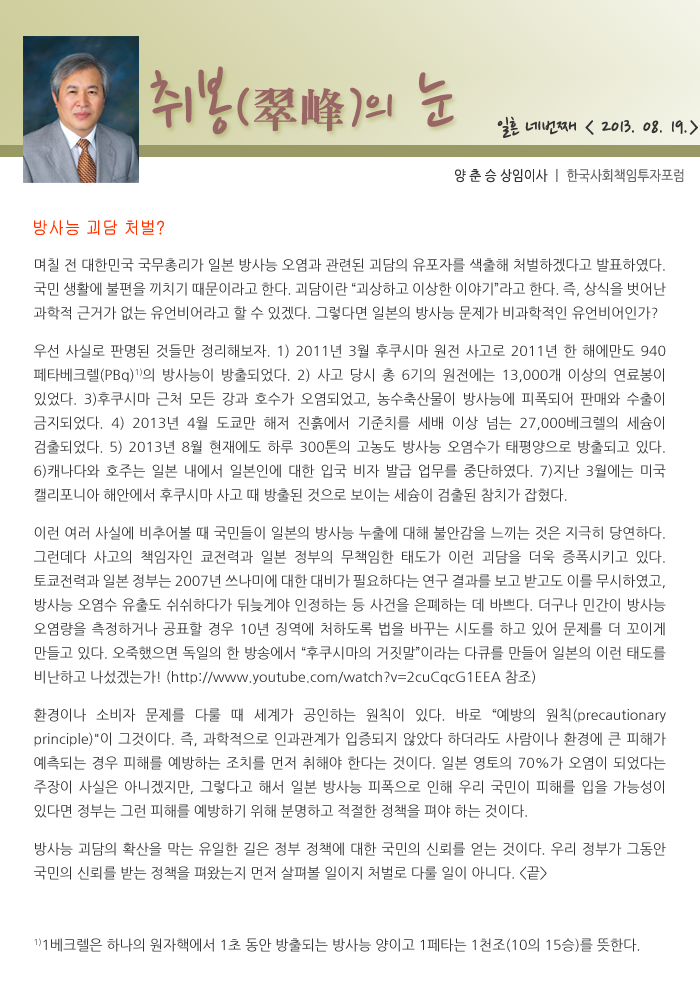
<style>
.page{position:relative;width:700px;height:992px;background:#ffffff}
.page>*{position:absolute;margin:0}
.t1{font:77.5px "NanumPen";color:#996666}
.t2{font:60px "NanumPen";color:#996666}
.t3{font:48px "H2mjrE";color:#996666}
.t4{font:24px "NanumPen";color:#333333}
.t5{font:14px "NanumGothic";color:#666666;scale:0.9 1}
.t6{font:14px "NanumGothic";color:#333333;scale:0.9 1}
.t7{font:18px "Gulim";color:#ff3300;scale:0.9 1}
.t8{font:14px/24px "NanumGothic";color:#333333}
.t9{font:14px/10px "NanumGothic";color:#333333}
.t10{font:14px/14px "NanumGothic";color:#333333}
</style>
<div class="page">
<p class="t1" style="left:150px;top:66px;width:304px;height:69px">취봉<span class="t2">(</span><span class="t3">翠峰</span><span class="t2">)</span><span class="t2">의</span> 눈</p>
<p class="t4" style="left:497px;top:116px;width:201px;height:22px">일흔 네번째 &lt; 2013. 08. 19.&gt;</p>
<p class="t5" style="left:455px;top:169px;width:229px;height:14px"><span class="t6">양 춘 승 상임이사 </span>ㅣ 한국사회책임투자포럼</p>
<p class="t7" style="left:34px;top:220px;width:130px;height:15px">방사능 괴담 처벌?</p>
<p class="t8" style="left:34px;top:258px;width:632px;height:694px;text-align:justify">며칠 전 대한민국 국무총리가 일본 방사능 오염과 관련된 괴담의 유포자를 색출해 처벌하겠다고 발표하였다. 국민 생활에 불편을 끼치기 때문이라고 한다. 괴담이란 “괴상하고 이상한 이야기”라고 한다. 즉, 상식을 벗어난 과학적 근거가 없는 유언비어라고 할 수 있겠다. 그렇다면 일본의<span class="t9"> 방사능 문제가 </span><span class="t10">비과학적인 유언비어인가?<br><br>우선 사실로 판명된 것들만 정리해보자. 1) 2011년 3월 후쿠시마 원전 사고로 2011년</span> 한 해에만도 940페타베크렐(PBq)1)의 방사능이 방출되었다. 2) 사고 당시 총 6기의 원전에는 13,000개 이상의 연료봉이 있었다. 3)후쿠시마 근처 모든 강과 호수가 오염되었고, 농수축산물이 방사능에 피폭되어 판매와 수출이 금지되었다. 4) 2013년 4월 도쿄만 해저 진흙에서 기준치를 세배 이상 넘는 27,000베크렐의 세슘이 검출되었다. 5) 2013년 8월 현재에도 하루 300톤의 고농도 방사능 오염수가 태평양으로 방출되고 있다. 6)캐나다와 호주는 일본 내에서 일본인에 대한 입국 비자 발급 업무를 중단하였다. 7)지난 3월에는 미국 캘리포니아 해안에서 후쿠시마 사고 때 방출된 것으로 보이는 세슘이 검출<span class="t10">된 참치가 잡혔다.<br><br>이런 여러 사실에 비추어볼 때 국민들이 일본의 방사능 누출에 대해 불안감을 느끼는 것은 지극</span>히 당연하다. 그런데다 사고의 책임자인 쿄전력과 일본 정부의 무책임한 태도가 이런 괴담을 더욱 증폭시키고 있다. 토쿄전력과 일본 정부는 2007년 쓰나미에 대한 대비가 필요하다는 연구 결과를 보고 받고도 이를 무시하였고, 방사능 오염수 유출도 쉬쉬하다가 뒤늦게야 인정하는 등 사건을 은폐하는 데 바쁘다. 더구나 민간이 방사능 오염량을 측정하거나 공표할 경우 10년 징역에 처하도록 법을 바꾸는 시도를 하고 있어 문제를 더 꼬이게 만들고 있다. 오죽했으면 독일의 한 방송에서 “후쿠시마의 거짓말”이라는 다큐를 만들어 일본의 이런 태도를 비난하고 나섰겠는가! (http://www.youtube.com/watch?v=2cuC<span class="t10">qcG1EEA 참조)<br><br>환경이나 소비자 문제를 다룰 때 세계가 공인하는 원칙이 있다. 바로 “예</span>방의 원칙(precautionary principle)"이 그것이다. 즉, 과학적으로 인과관계가 입증되지 않았다 하더라도 사람이나 환경에 큰 피해가 예측되는 경우 피해를 예방하는 조치를 먼저 취해야 한다는 것이다. 일본 영토의 70%가 오염이 되었다는 주장이 사실은 아니겠지만, 그렇다고 해서 일본 방사능 피폭으로 인해 우리 국민이 피해를 입을 가능성이 있다면 정부는 그런 피해를 예방하기 위해 분명하고 적절한 정책<span class="t10">을 펴야 하는 것이다. <br><br>방사능 괴담의 확산을 막는 유일한 길은 정부 정책에 대한 국민의 신뢰를</span> 얻는 것이다. 우리 정부가 그동안 국민의 신뢰를 받는 정책을 펴왔는지 먼저 살펴볼 일이지 처벌로 다룰 일이 아니다. &lt;끝&gt;<br><br><br>1)1베크렐은 하나의 원자핵에서 1초 동안 방출되는 방사능 양이고 1페타는 1천조(10의 15승)를 뜻한다.</p>
</div>
